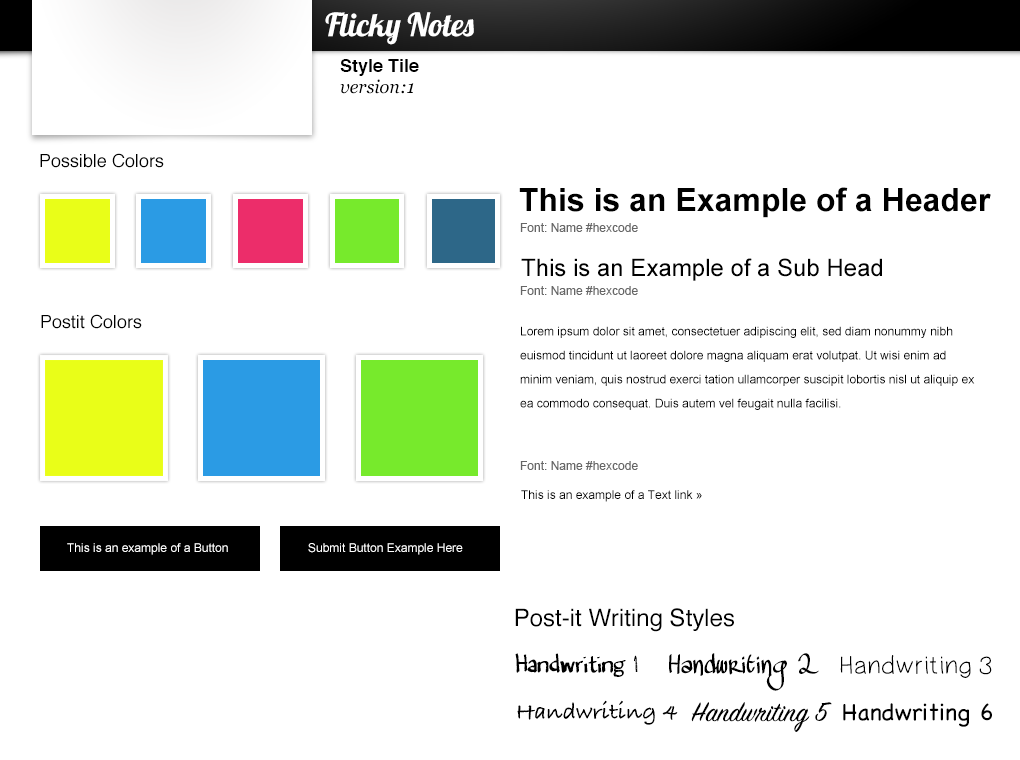
<style>
.page{position:relative;width:1020px;height:760px;background:#ffffff}
.page>*{position:absolute;margin:0}
.t1{font:32px "Lobster-Regular";color:#ffffff}
.t2{font:18px "Helvetica-Bold";color:#000000}
.t3{font:18px "Georgia-Italic";color:#000000}
.t4{font:18px "Helvetica";color:#000000}
.t5{font:32px "Arial-BoldMT";color:#000000}
.t6{font:12px "ArialMT";color:#666666}
.t7{font:24px "ArialMT";color:#000000}
.t8{font:12px/24px "ArialMT";color:#000000}
.t9{font:12px "ArialMT";color:#000000}
.t10{font:12px "ArialMT";color:#ffffff}
.t11{font:24px "Helvetica";color:#000000}
.t12{font:24px "Denne'sOldHandwriting";color:#000000}
.t13{font:24px "MAWNSHandwriting";color:#000000}
.t14{font:24px "PWSimpleHandwriting";color:#000000}
.t15{font:24px "BradleyHandITCTT-Bold";color:#000000}
.t16{font:30px "SignPainter-HouseScript";color:#000000}
.t17{font:24px "Chalkboard";color:#000000}
</style>
<div class="page">
<p class="t1" style="left:325px;top:12px;width:149px;height:33px">Flicky Notes</p>
<p class="t2" style="left:340px;top:59px;width:79px;height:17px">Style Tile</p>
<p class="t3" style="left:340px;top:79px;width:74px;height:15px">version:1</p>
<p class="t4" style="left:40px;top:153px;width:124px;height:15px">Possible Colors</p>
<p class="t5" style="left:519px;top:187px;width:472px;height:31px">This is an Example of a Header</p>
<p class="t6" style="left:520px;top:223px;width:118px;height:9px">Font: Name #hexcode</p>
<p class="t7" style="left:521px;top:258px;width:361px;height:23px">This is an Example of a Sub Head</p>
<p class="t6" style="left:520px;top:286px;width:118px;height:9px">Font: Name #hexcode</p>
<p class="t4" style="left:41px;top:314px;width:101px;height:15px">Postit Colors</p>
<p class="t8" style="left:520px;top:326px;width:455px;height:84px">Lorem ipsum dolor sit amet, consectetuer adipiscing elit, sed diam nonummy nibh euismod tincidunt ut laoreet dolore magna aliquam erat volutpat. Ut wisi enim ad minim veniam, quis nostrud exerci tation ullamcorper suscipit lobortis nisl ut aliquip ex ea commodo consequat. Duis autem vel feugait nulla facilisi.</p>
<p class="t6" style="left:520px;top:461px;width:118px;height:9px">Font: Name #hexcode</p>
<p class="t9" style="left:521px;top:490px;width:181px;height:12px">This is an example of a Text link »</p>
<p class="t10" style="left:67px;top:543px;width:161px;height:12px">This is an example of a Button</p>
<p class="t10" style="left:308px;top:543px;width:155px;height:12px">Submit Button Example Here</p>
<p class="t11" style="left:515px;top:608px;width:219px;height:24px">Post-it Writing Styles</p>
<p class="t12" style="left:515px;top:653px;width:123px;height:24px">Handwriting 1</p>
<p class="t13" style="left:669px;top:653px;width:150px;height:38px">Handwriting 2</p>
<p class="t14" style="left:840px;top:655px;width:152px;height:23px">Handwriting 3</p>
<p class="t15" style="left:517px;top:700px;width:161px;height:25px">Handwriting 4</p>
<p class="t16" style="left:691px;top:702px;width:141px;height:30px">Handwriting 5</p>
<p class="t17" style="left:843px;top:703px;width:149px;height:24px">Handwriting 6</p>
</div>
